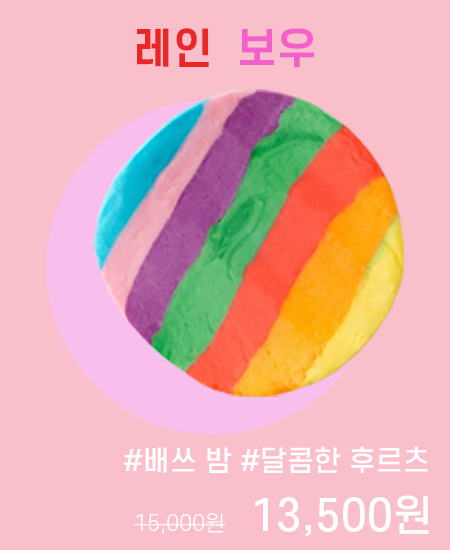
<style>
.page{position:relative;width:450px;height:550px;background:#f9bfcb}
.page>*{position:absolute;margin:0}
.t1{font:41.7px "S-CoreDream-6Bold";color:#eb2626}
.t2{font:41.7px "S-CoreDream-6Bold";color:#f45fcc}
.t3{font:27.8px "S-CoreDream-5Medium";color:#ffffff}
.t4{font:20.8px "S-CoreDream-3Light";color:#ffffff}
.t5{font:41.7px "S-CoreDream-5Medium";color:#ffffff}
</style>
<div class="page">
<p class="t1" style="left:137px;top:28px;width:177px;height:40px">레인  <span class="t2">보우</span></p>
<p class="t3" style="left:124px;top:446px;width:304px;height:27px">#배쓰 밤 #달콤한 후르츠</p>
<p class="t4" style="left:134px;top:495px;width:295px;height:41px">15,000원     <span class="t5">13,500원</span></p>
</div>
